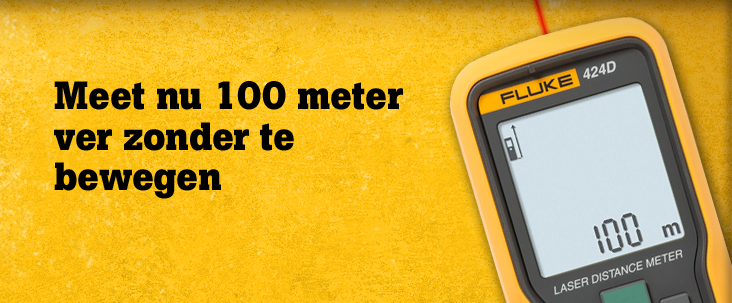
<style>
.page{position:relative;width:732px;height:303px}
.page>*{position:absolute;margin:0}
.t1{font:39px/30px "BotonPro-Bold";letter-spacing:-0.01em;color:#000000}
</style>
<div class="page">
<p class="t1" style="left:54px;top:81px;width:349px;height:118px">Meet nu 100 meter <br>ver zonder te <br>bewegen</p>
</div>
